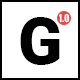
<style>
.page{position:relative;width:80px;height:80px;background:#ffffff}
.page>*{position:absolute;margin:0}
.t1{font:65px "Roboto-Black";color:#000000}
.t2{font:9px "Oswald-Bold";color:#ffffff}
</style>
<div class="page">
<p class="t1" style="left:20px;top:17px;width:40px;height:48px">G</p>
<p class="t2" style="left:59px;top:13px;width:11px;height:10px">1.0</p>
</div>
